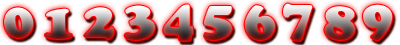
<style>
.page{position:relative;width:400px;height:45px}
.page>*{position:absolute;margin:0}
.t1{font:50px "CooperBlackStd";letter-spacing:0.125em}
</style>
<div class="page">
<p class="t1" style="left:124px;top:5px;width:31px;height:35px">3</p>
<p class="t1" style="left:163px;top:4px;width:30px;height:37px">4</p>
<p class="t1" style="left:203px;top:6px;width:29px;height:34px">5</p>
<p class="t1" style="left:244px;top:5px;width:31px;height:35px">6</p>
<p class="t1" style="left:324px;top:6px;width:31px;height:34px">8</p>
<p class="t1" style="left:4px;top:7px;width:30px;height:31px">0</p>
<p class="t1" style="left:45px;top:8px;width:27px;height:31px">1</p>
</div>
